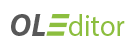
<style>
.page{position:relative;width:136px;height:50px;background:#ffffff}
.page>*{position:absolute;margin:0}
.t1{font:32px "MyriadPro-BoldIt";color:#585858;scale:0.95 1}
.t2{font:30px "MyriadPro-Regular";color:#8cbe3f;scale:0.95 1}
</style>
<div class="page">
<p class="t1" style="left:11px;top:14px;width:34px;height:22px">OL</p>
<p class="t2" style="left:69px;top:14px;width:56px;height:22px">ditor</p>
</div>
